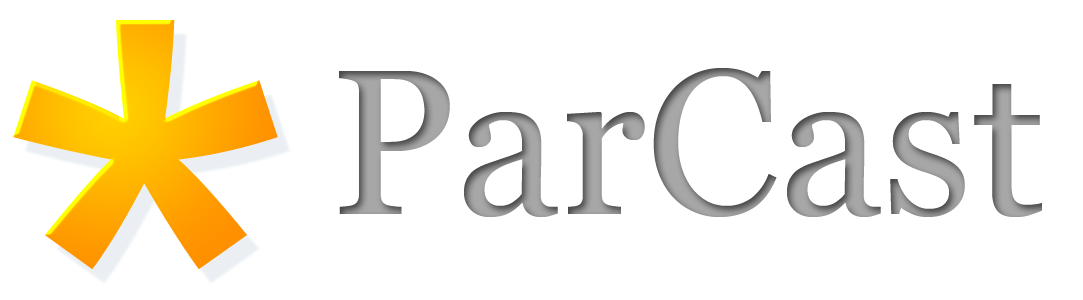
<style>
.page{position:relative;width:1083px;height:300px;background:#ffffff}
.page>*{position:absolute;margin:0}
.t1{font:818.2px "ArialMT"}
.t2{font:207.3px "Georgia";color:#a7a7a7}
</style>
<div class="page">
<p class="t1" style="left:13px;top:20px;width:265px;height:249px">*</p>
<p class="t2" style="left:339px;top:68px;width:703px;height:149px">ParCast</p>
</div>
